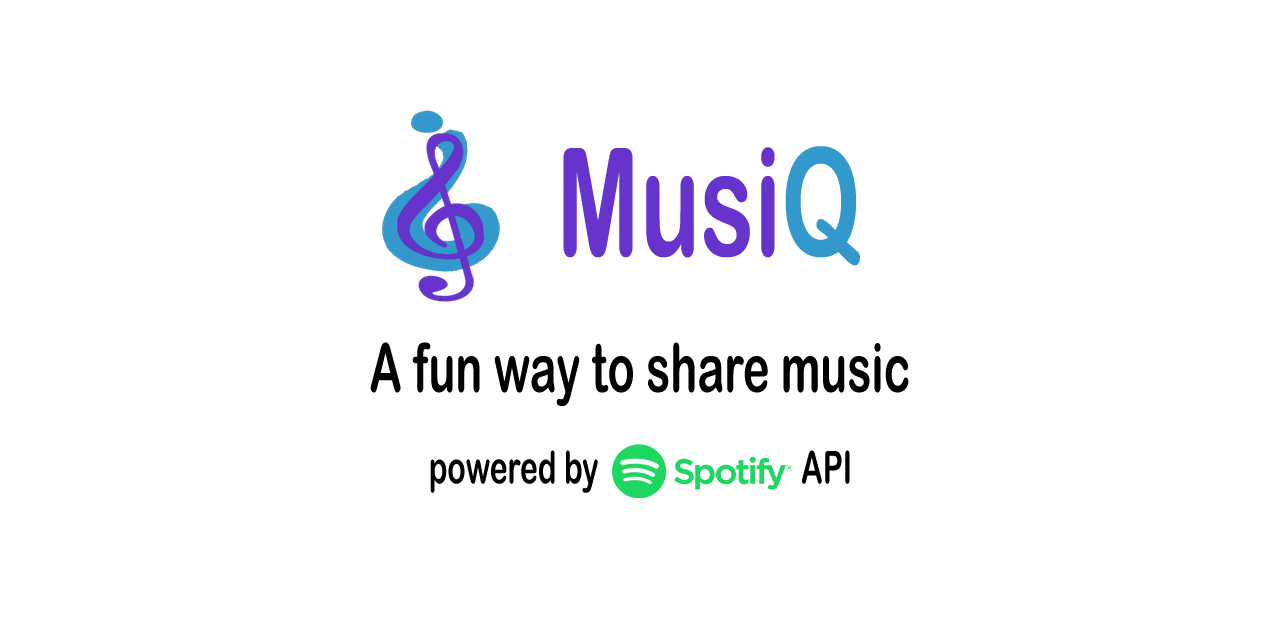
<style>
.page{position:relative;width:1280px;height:640px;background:#ffffff}
.page>*{position:absolute;margin:0}
.t1{font:150px "ArialRoundedMTBold";color:#6633cc;scale:0.67 1}
.t2{font:150px "ArialRoundedMTBold";color:#3399cc;scale:0.67 1}
.t3{font:67.5px "ArialRoundedMTBold";color:#000000;scale:0.67 1}
.t4{font:45px "ArialRoundedMTBold";color:#000000;scale:0.67 1}
</style>
<div class="page">
<p class="t1" style="left:563px;top:146px;width:297px;height:120px">Musi<span class="t2">Q</span></p>
<p class="t3" style="left:370px;top:342px;width:539px;height:64px">A fun way to share music</p>
<p class="t4" style="left:430px;top:450px;width:420px;height:43px">powered by                           API</p>
</div>
